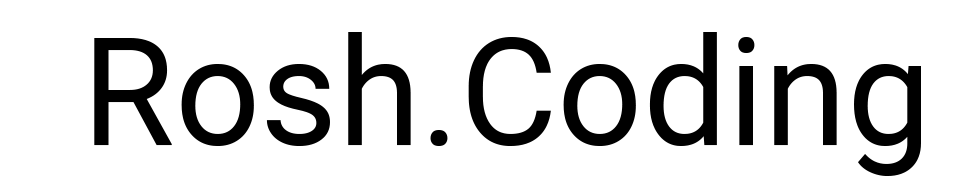
<style>
.page{position:relative;width:958px;height:196px;background:#ffffff}
.page>*{position:absolute;margin:0}
.t1{font:150px "Roboto-Regular";color:#000000}
</style>
<div class="page">
<p class="t1" style="left:94px;top:32px;width:827px;height:144px">Rosh.Coding</p>
</div>
